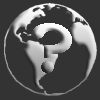
<style>
.page{position:relative;width:100px;height:100px;background:#333333}
.page>*{position:absolute;margin:0}
.t1{font:72px "BookmanOldStyle-Bold"}
</style>
<div class="page">
<p class="t1" style="left:32px;top:23px;width:40px;height:50px">?</p>
</div>
